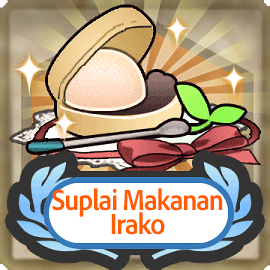
<style>
.page{position:relative;width:270px;height:270px}
.page>*{position:absolute;margin:0}
.t1{font:30px/24px "AdobeClean-Bold";letter-spacing:-0.04em;color:#ff5d00;scale:0.9 1}
</style>
<div class="page">
<p class="t1" style="left:52px;top:188px;width:171px;height:47px;text-align:center">Suplai Makanan<br>Irako</p>
</div>
